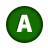
<style>
.page{position:relative;width:48px;height:48px;background:#ffffff}
.page>*{position:absolute;margin:0}
.t1{font:25.5px "MyriadPro-Bold";color:#ffffff;scale:0.97 1}
</style>
<div class="page">
<p class="t1" style="left:16px;top:14px;width:16px;height:18px">A</p>
</div>
